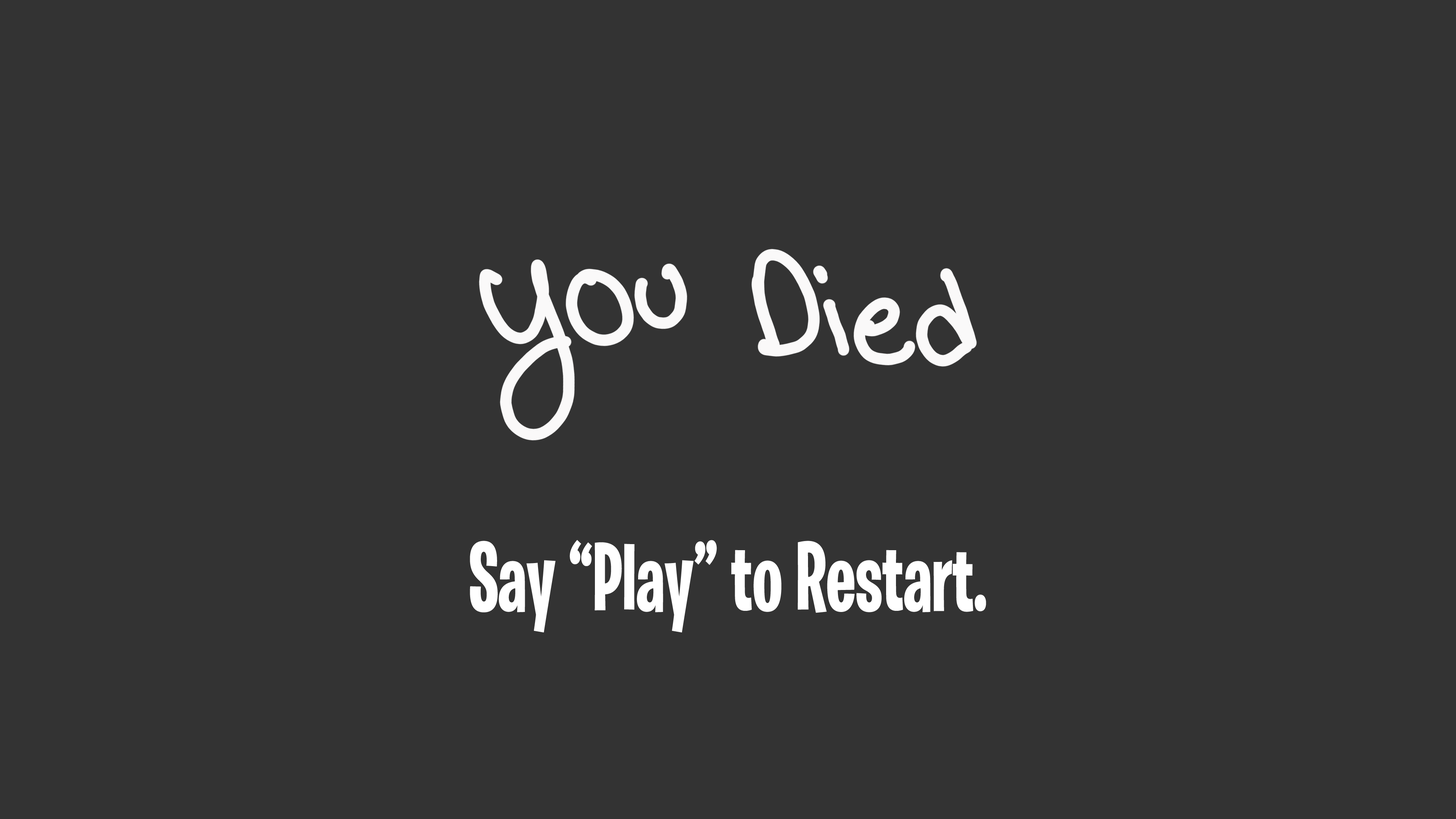
<style>
.page{position:relative;width:1456px;height:819px;background:#333333}
.page>*{position:absolute;margin:0}
.t1{font:98.6px "BurbankBigCondensed-Bold";color:#ffffff;scale:0.77 1}
</style>
<div class="page">
<p class="t1" style="left:470px;top:540px;width:516px;height:92px">Say “Play” to Restart.</p>
</div>
